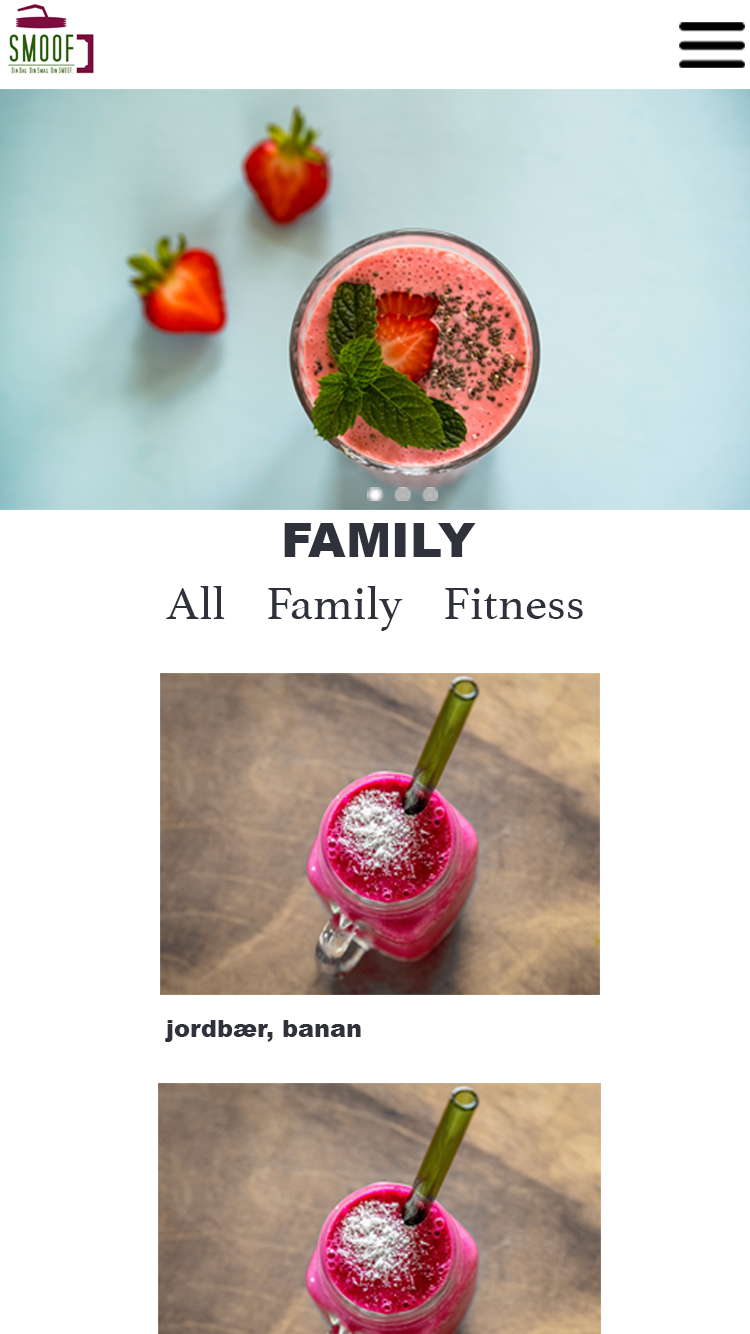
<style>
.page{position:relative;width:750px;height:1334px;background:#ffffff}
.page>*{position:absolute;margin:0}
.t1{font:48px "Arial-Black";color:#2f323a}
.t2{font:48px "Athelas-Regular";color:#2f323a}
.t3{font:24px "Arial-Black";color:#2f323a}
</style>
<div class="page">
<p class="t1" style="left:284px;top:523px;width:192px;height:34px">FAMILY</p>
<p class="t2" style="left:166px;top:586px;width:417px;height:45px">All    Family    Fitness</p>
<p class="t3" style="left:164px;top:1020px;width:197px;height:22px">jordbær, banan</p>
</div>
